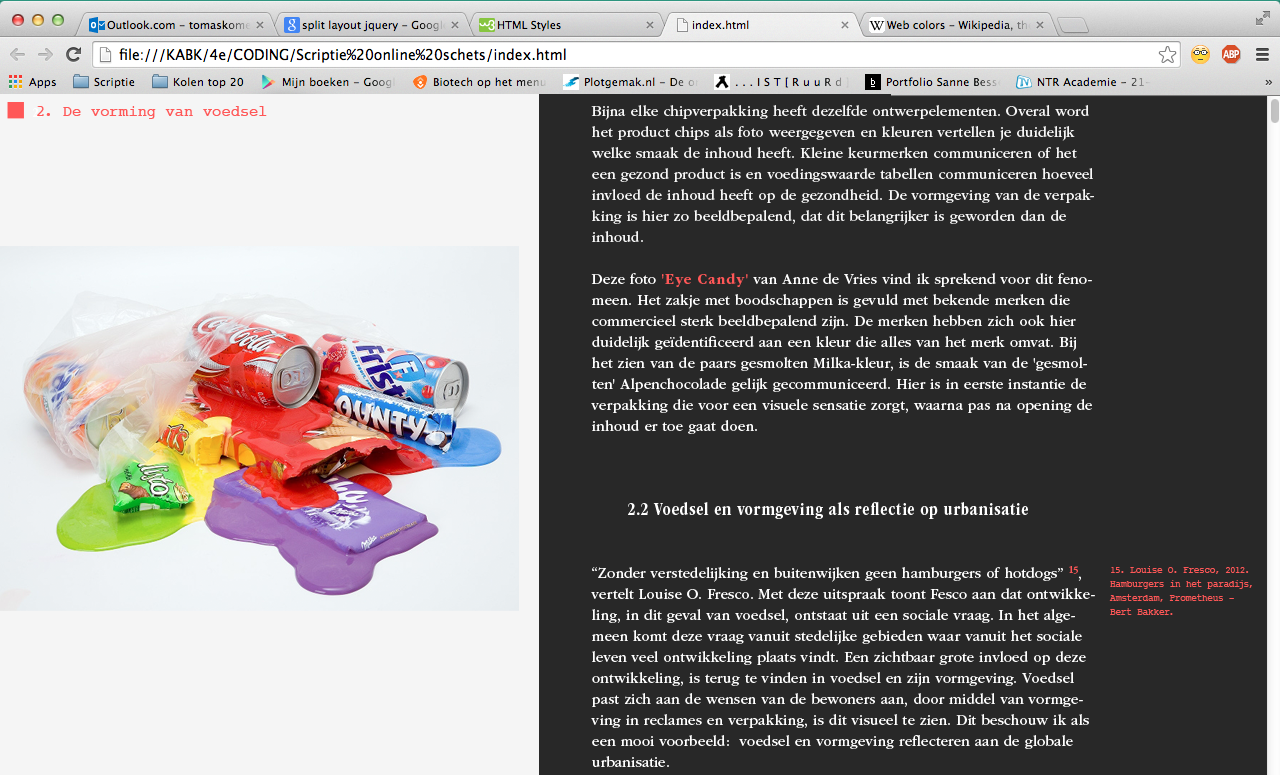
<style>
.page{position:relative;width:1280px;height:775px;background:#282828}
.page>*{position:absolute;margin:0}
.t1{font:14px "ITCGaramondStd-BdNarrow";letter-spacing:0.03em;color:#ffffff}
.t2{font:15.5px "Courier";letter-spacing:0.01em;color:#ff5757}
.t3{font:15px/21px "ITCGaramondStd-Bk";letter-spacing:0.01em;color:#ffffff}
.t4{font:15px/21px "ITCGaramondStd-Bk";letter-spacing:0.01em;color:#f7f7f7}
.t5{font:15px/21px "ITCGaramondStd-Bd";letter-spacing:0.05em;color:#ff5757}
.t6{font:15px/21px "ITCGaramondStd-BdNarrow";letter-spacing:0.05em;color:#ff5757}
.t7{font:18px/21px "ITCGaramondStd-BdNarrow";letter-spacing:0.01em;color:#ffffff}
.t8{font:18px/21px "ITCGaramondStd-BdNarrow";letter-spacing:0.03em;color:#ffffff}
.t9{font:10px/21px "ITCGaramondStd-Bk";letter-spacing:0.01em;color:#ff5757}
.t10{font:9.5px/14px "Courier";letter-spacing:-0.03em;color:#ff5757}
</style>
<div class="page">
<p class="t1" style="left:32px;top:108px;width:11px;height:9px">2.</p>
<p class="t2" style="left:37px;top:106px;width:230px;height:13px">2. De vorming van voedsel</p>
<p class="t3" style="left:591px;top:105px;width:504px;height:662px"><span class="t4">Bijna elke chipverpakking heeft dezelfde ontwerpelementen. Overal word het product chips als foto weergegeven en kleuren vertellen je duidelijk welke smaak de inhoud heeft. Kleine keurmerken communiceren of het een gezond product is en voedingswaarde tabellen communiceren hoeveel invloed de inhoud heeft op de gezondheid. De vormgeving van de verpakking is hier zo beeldbepalend, dat dit belangrijker is geworden dan de inhoud.<br></span><br>Deze foto <span class="t5">'Eye Candy</span><span class="t6">'</span> van Anne de Vries vind ik sprekend voor dit fenomeen. Het zakje met boodschappen is gevuld met bekende merken die commercieel sterk beeldbepalend zijn. De merken hebben zich ook hier duidelijk geïdentificeerd aan een kleur die alles van het merk omvat. Bij het zien van de paars gesmolten Milka-kleur, is de smaak van de 'gesmolten' Alpenchocolade gelijk gecommuniceerd. Hier is in eerste instantie de verpakking die voor een visuele sensatie zorgt, waarna pas na opening de inhoud er toe gaat doen. <br><br><br><br> <span class="t7">2.2 </span><span class="t8">Voedsel en vormgeving als reflectie op urbanisatie<br></span><br><br>“Zonder verstedelijking en buitenwijken geen hamburgers of hotdogs” <span class="t9">15</span>, vertelt Louise O. Fresco. Met deze uitspraak toont Fesco aan dat ontwikkeling, in dit geval van voedsel, ontstaat uit een sociale vraag. In het algemeen komt deze vraag vanuit stedelijke gebieden waar vanuit het sociale leven veel ontwikkeling plaats vindt. Een zichtbaar grote invloed op deze ontwikkeling, is terug te vinden in voedsel en zijn vormgeving. Voedsel past zich aan de wensen van de bewoners aan, door middel van vormgeving in reclames en verpakking, is dit visueel te zien. Dit beschouw ik als een mooi voorbeeld:  voedsel en vormgeving reflecteren aan de globale urbanisatie. <br><br>Voedsel heeft in stadscentra een nieuwe dimensie gekregen: voedsel is een vluchtig en sociaal verschijnsel geworden. Dit zou een logisch fenomeen kunnen zijn dat gepaard gaat met de manier waarop de mens omgaat met online sociale media. <br><br>Door urbanisatie is er een speciaal type voedsel en een cultuur ontstaan die ingaan op de vraag naar snel bereid en geserveerd voedsel dat relatief goedkoop is. Internationaal wordt dit omschreven als de 'fastfood', of 'gemaksvoedsel'. In de jaren 50 commercialiseerde de fastfood tot hoe wij dit nu kennen. brekende ontwikkeling gemaakt, met bijvoorbeeld het in vitro kweekvlees. Het hoeft niet lang meer te duren voordat deze en andere technieken, commerciële realiteit kunnen worden. Deze veranderingen zouden drastische gevolgen hebben op de structuur van de huidige samenleving. Zo zal er een nieuw infrastructuurnetwerk ontworpen moeten worden en is politieke hervorming nodig. <br><br>Om dit gevolg voor de meeste mensen visueel duidelijk te maken, zijn kunstenaars en ontwerpers bezig deze abstracte informatie om te zetten naar speculatieve kunst projecten. Op deze manier geven de projecten een fictief beeld weer, die bewustzijn creëert over welke techniek invloed krijgt op de toekomstige maatschappij.</p>
<p class="t10" style="left:1109px;top:566px;width:143px;height:49px">15. Louise O. Fresco, 2012. <br>Hamburgers in het paradijs, <br>Amsterdam, Prometheus - <br>Bert Bakker.</p>
</div>
